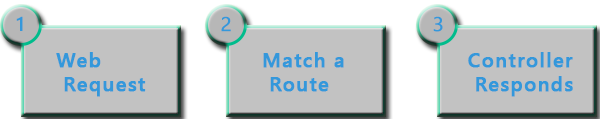
<style>
.page{position:relative;width:600px;height:119px;background:#c2c2c2}
.page>*{position:absolute;margin:0}
.t1{font:19.8px "SegoeUI";letter-spacing:0.05em;color:#3498db;font-weight:bold}
.t2{font:20px "SegoeUI";letter-spacing:0.05em;color:#3498db;font-weight:bold}
.t3{font:20px "SegoeUI-Semibold";letter-spacing:0.05em;color:#3498db;font-weight:bold}
</style>
<div class="page">
<p class="t1" style="left:16px;top:16px;width:7px;height:15px">1</p>
<p class="t2" style="left:221px;top:16px;width:10px;height:16px">2</p>
<p class="t2" style="left:433px;top:16px;width:10px;height:16px">3</p>
<p class="t3" style="left:56px;top:52px;width:90px;height:45px">Web    Request</p>
<p class="t3" style="left:263px;top:52px;width:81px;height:40px">Match a                   <br> Route</p>
<p class="t3" style="left:468px;top:52px;width:105px;height:45px">Controller<br> Responds</p>
</div>
